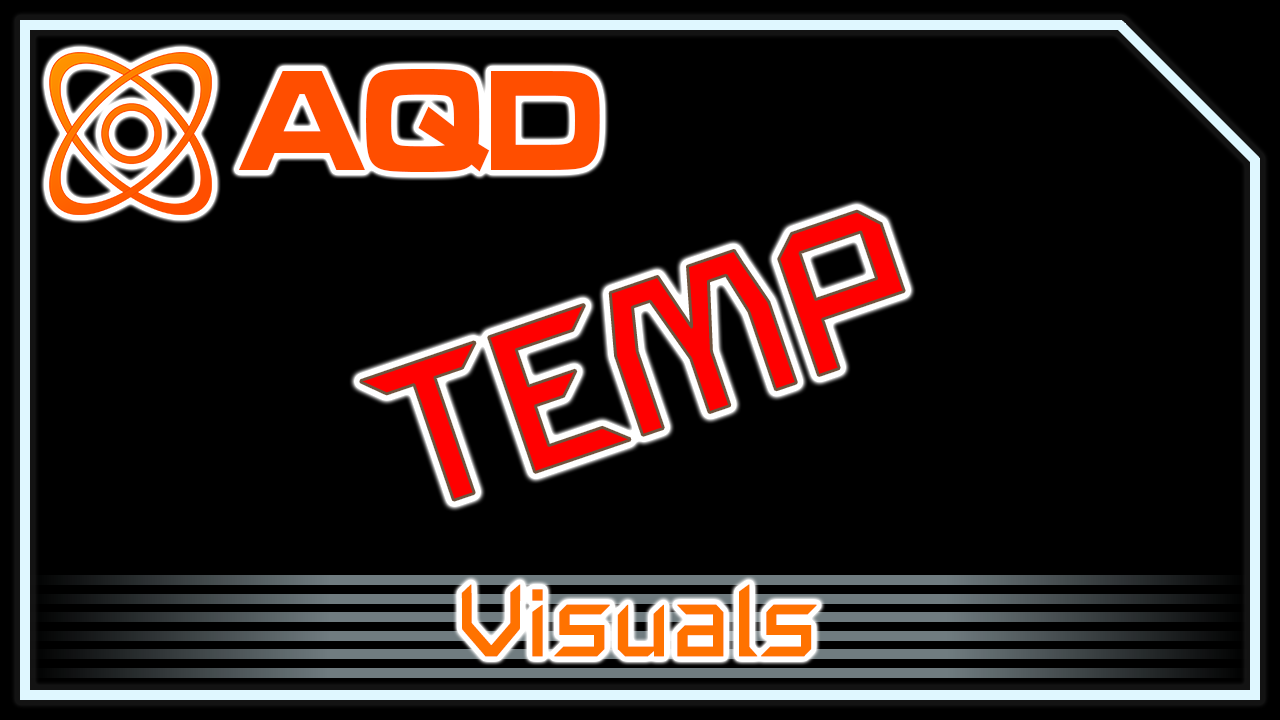
<style>
.page{position:relative;width:1280px;height:720px;background:#000000}
.page>*{position:absolute;margin:0}
.t1{font:148.7px "MicrogrammaD-BoldExte";color:#ff4e00;scale:0.83 1}
.t2{font:200px "SpaceEngineers";color:#ff0000;font-weight:bold}
.t3{font:99px "SpaceEngineers";color:#ff7200;font-weight:bold}
</style>
<div class="page">
<p class="t1" style="left:238px;top:69px;width:362px;height:104px">AQD</p>
<p class="t2" style="left:361px;top:211px;width:543px;height:289px;rotate:-19deg">TEMP</p>
<p class="t3" style="left:461px;top:584px;width:356px;height:73px">Visuals</p>
</div>
